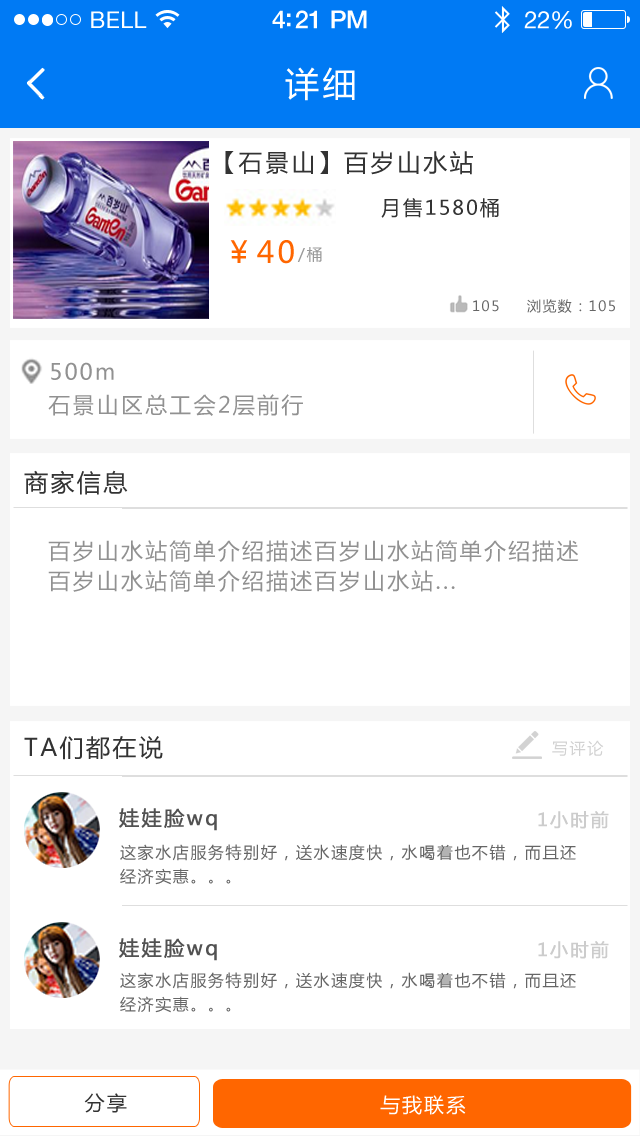
<style>
.page{position:relative;width:640px;height:1136px;background:#ffffff}
.page>*{position:absolute;margin:0}
.t1{font:23px "HelveticaNeue";letter-spacing:0.02em;color:#ffffff}
.t2{font:25px "HelveticaNeue-Medium";letter-spacing:-0.02em;color:#ffffff}
.t3{font:24px "HelveticaNeue";letter-spacing:-0.02em;color:#ffffff}
.t4{font:34px "MicrosoftYaHei";letter-spacing:0.1em;color:#ffffff}
.t5{font:24px "MicrosoftYaHei";letter-spacing:0.1em;color:#333333}
.t6{font:20px "MicrosoftYaHei";letter-spacing:0.1em;color:#333333}
.t7{font:30px "MicrosoftYaHei";letter-spacing:0.1em;color:#ff6600}
.t8{font:16px "MicrosoftYaHei";letter-spacing:0.1em;color:#9a9a9a}
.t9{font:14px "MicrosoftYaHei";letter-spacing:0.1em;color:#666666}
.t10{font:22px "MicrosoftYaHei";letter-spacing:0.1em;color:#919191}
.t11{font:22px/30px "MicrosoftYaHei";letter-spacing:0.1em;color:#919191}
.t12{font:20px "MicrosoftYaHei";letter-spacing:0.1em;color:#525252;font-weight:bold}
.t13{font:18px "MicrosoftYaHei";letter-spacing:0.1em;color:#cccccc;font-weight:bold}
.t14{font:16px/24px "MicrosoftYaHei";letter-spacing:0.1em;color:#666666}
.t15{font:20px "MicrosoftYaHei";letter-spacing:0.1em;color:#ffffff}
</style>
<div class="page">
<p class="t1" style="left:91px;top:11px;width:56px;height:17px">BELL</p>
<p class="t2" style="left:272px;top:10px;width:95px;height:19px">4:21 PM</p>
<p class="t3" style="left:524px;top:11px;width:48px;height:18px">22%</p>
<p class="t4" style="left:285px;top:67px;width:70px;height:34px">详细</p>
<p class="t5" style="left:225px;top:151px;width:248px;height:24px">【石景山】百岁山水站</p>
<p class="t6" style="left:381px;top:198px;width:118px;height:20px">月售1580桶</p>
<p class="t7" style="left:230px;top:240px;width:64px;height:24px">￥40</p>
<p class="t8" style="left:297px;top:247px;width:25px;height:15px">/桶</p>
<p class="t9" style="left:473px;top:300px;width:26px;height:12px">105</p>
<p class="t9" style="left:527px;top:299px;width:88px;height:14px">浏览数：105</p>
<p class="t10" style="left:51px;top:362px;width:63px;height:18px">500m</p>
<p class="t10" style="left:48px;top:394px;width:255px;height:22px">石景山区总工会2层前行</p>
<p class="t5" style="left:24px;top:470px;width:104px;height:25px">商家信息</p>
<p class="t11" style="left:48px;top:540px;width:531px;height:52px">百岁山水站简单介绍描述百岁山水站简单介绍描述<br>百岁山水站简单介绍描述百岁山水站...</p>
<p class="t5" style="left:24px;top:736px;width:139px;height:24px">TA们都在说</p>
<p class="t12" style="left:119px;top:808px;width:98px;height:23px">娃娃脸wq</p>
<p class="t13" style="left:538px;top:811px;width:71px;height:18px">1小时前</p>
<p class="t14" style="left:120px;top:844px;width:456px;height:41px">这家水店服务特别好，送水速度快，水喝着也不错，而且还<br>经济实惠。。。</p>
<p class="t12" style="left:119px;top:938px;width:98px;height:23px">娃娃脸wq</p>
<p class="t13" style="left:538px;top:941px;width:71px;height:18px">1小时前</p>
<p class="t14" style="left:120px;top:972px;width:456px;height:41px">这家水店服务特别好，送水速度快，水喝着也不错，而且还<br>经济实惠。。。</p>
<p class="t6" style="left:84px;top:1093px;width:43px;height:20px">分享</p>
<p class="t15" style="left:380px;top:1095px;width:86px;height:20px">与我联系</p>
</div>
